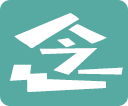
<style>
.page{position:relative;width:128px;height:106px;background:#56aaa2}
.page>*{position:absolute;margin:0}
.t1{font:100px "ShanghaiFace-Art-BoldGB1.0";color:#ffffff;scale:1.53 1}
</style>
<div class="page">
<p class="t1" style="left:10px;top:13px;width:113px;height:79px">念</p>
</div>
